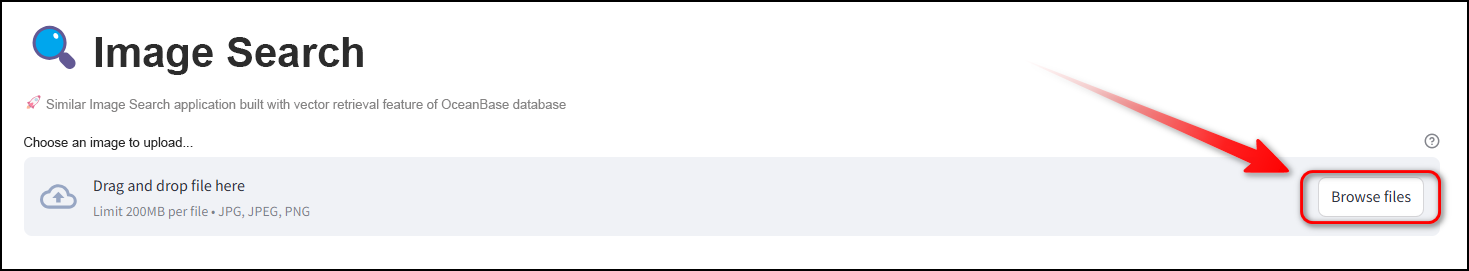
<style>
.page{position:relative;width:1469px;height:271px;background:#ffffff}
.page>*{position:absolute;margin:0}
.t1{font:42px "Arial-BoldMT";color:#2c2c2c}
.t2{font:13px "ArialMT";color:#858484}
.t3{font:13px "ArialMT";color:#282828}
</style>
<div class="page">
<p class="t1" style="left:95px;top:37px;width:268px;height:38px">Image Search</p>
<p class="t2" style="left:46px;top:99px;width:520px;height:13px">Similar Image Search application built with vector retrieval feature of OceanBase database</p>
<p class="t3" style="left:24px;top:137px;width:169px;height:13px">Choose an image to upload...</p>
</div>
